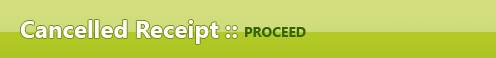
<style>
.page{position:relative;width:496px;height:58px}
.page>*{position:absolute;margin:0}
.t1{font:24px "SegoeUI-Bold";color:#fefefe}
.t2{font:14px "SegoeUI-Bold";color:#336600}
</style>
<div class="page">
<p class="t1" style="left:20px;top:20px;width:217px;height:24px">Cancelled Receipt ::</p>
<p class="t2" style="left:245px;top:27px;width:61px;height:10px">PROCEED</p>
</div>
